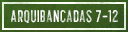
<style>
.page{position:relative;width:128px;height:32px}
.page>*{position:absolute;margin:0}
.t1{font:12px "HillstownCondensedClean";letter-spacing:0.05em;text-transform:uppercase}
</style>
<div class="page">
<p class="t1" style="left:11px;top:10px;width:107px;height:13px">arquibancadas 7-12</p>
</div>
